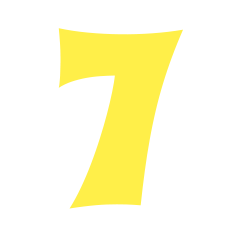
<style>
.page{position:relative;width:236px;height:236px;background:#ffffff}
.page>*{position:absolute;margin:0}
.t1{font:250px "SpicyRice-Regular";color:#ffef49}
</style>
<div class="page">
<p class="t1" style="left:58px;top:28px;width:125px;height:181px">7</p>
</div>
